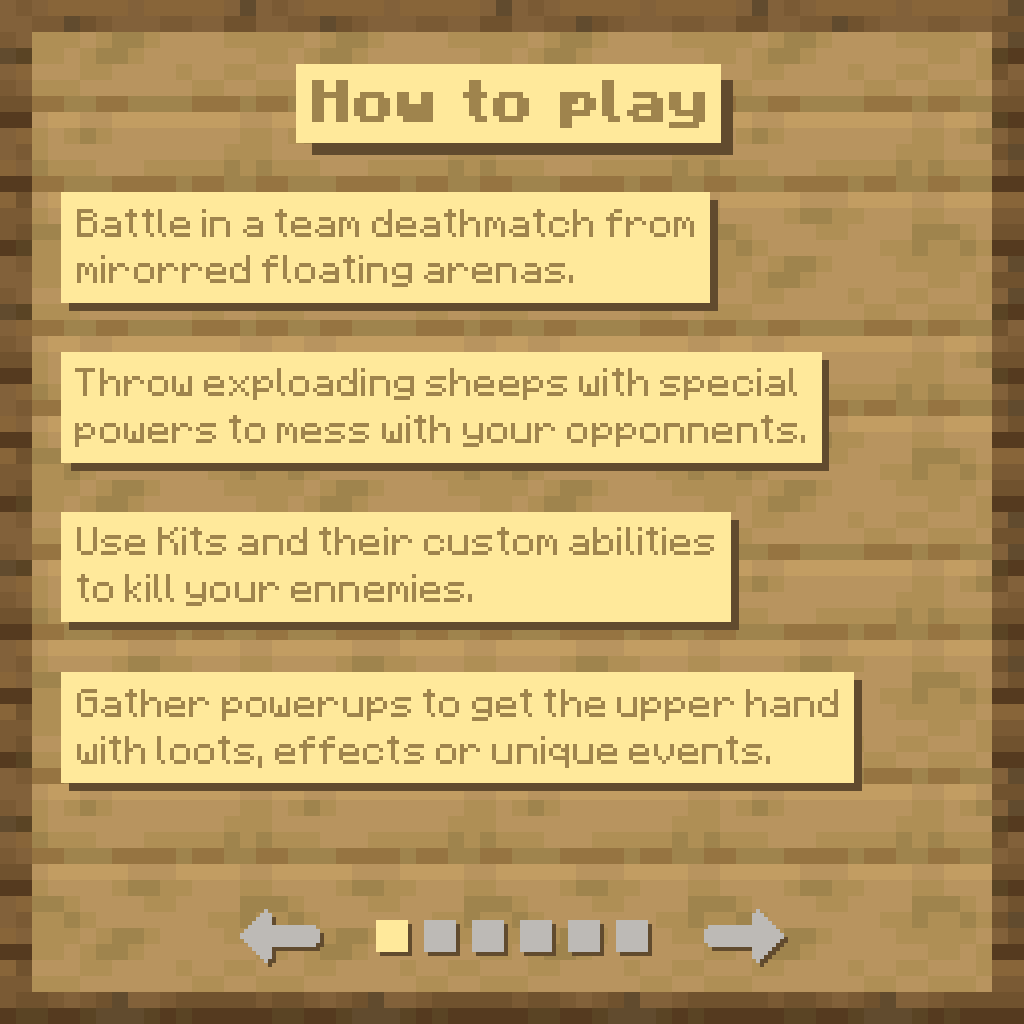
<style>
.page{position:relative;width:1024px;height:1024px;background:#ffe99b}
.page>*{position:absolute;margin:0}
.t1{font:60px "Minecraft-Bold";letter-spacing:0.005em;color:#9f844d}
.t2{font:32px/46.7px "Minecraftia-Regular";letter-spacing:0.005em;color:#9f844d}
</style>
<div class="page">
<p class="t1" style="left:312px;top:80px;width:393px;height:48px">How to play</p>
<p class="t2" style="left:77px;top:209px;width:617px;height:78px">Battle in a team deathmatch from <br>mirorred floating arenas.</p>
<p class="t2" style="left:75px;top:368px;width:730px;height:79px">Throw exploading sheeps with special<br>powers to mess with your opponnents.</p>
<p class="t2" style="left:77px;top:527px;width:637px;height:79px">Use Kits and their custom abilities<br>to kill your ennemies.</p>
<p class="t2" style="left:77px;top:689px;width:761px;height:79px">Gather powerups to get the upper hand<br>with loots, effects or unique events.</p>
</div>
